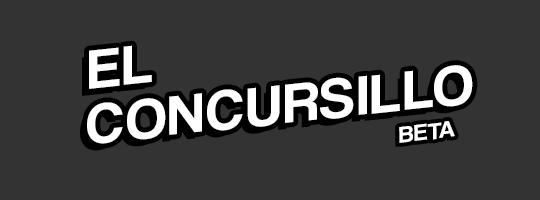
<style>
.page{position:relative;width:540px;height:200px;background:#333333}
.page>*{position:absolute;margin:0}
.t1{font:57.5px "CoolveticaRg-Regular";letter-spacing:0.04em;color:#ffffff;scale:1.05 1}
.t2{font:23.8px "CoolveticaRg-Regular";letter-spacing:0.04em;color:#ffffff;scale:1.05 1}
</style>
<div class="page">
<p class="t1" style="left:89px;top:45px;width:63px;height:44px;rotate:-6deg">EL</p>
<p class="t1" style="left:87px;top:65px;width:386px;height:79px;rotate:-6deg">CONCURSILLO</p>
<p class="t2" style="left:399px;top:121px;width:56px;height:22px;rotate:-7deg">BETA</p>
</div>
